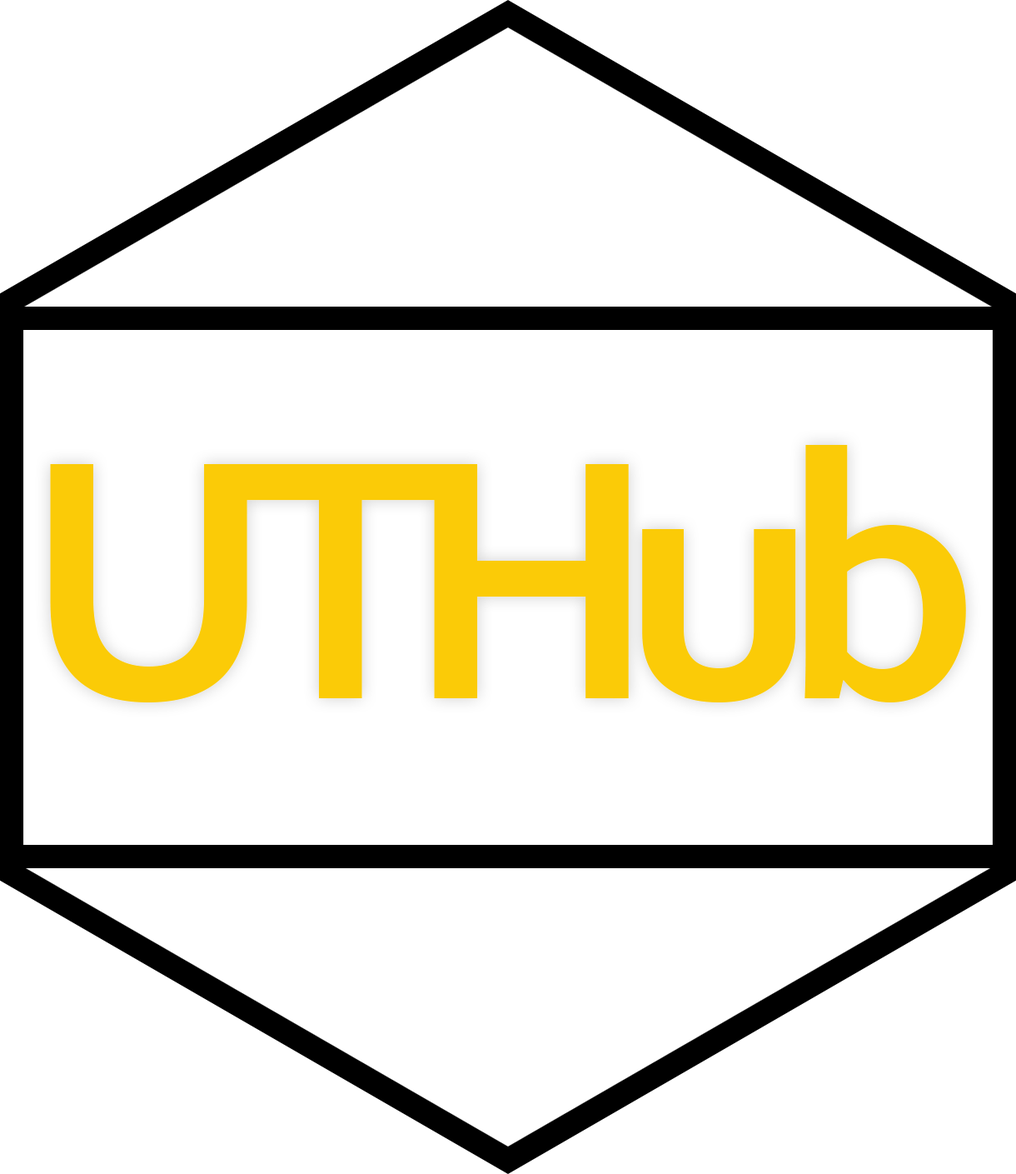
<style>
.page{position:relative;width:1016px;height:1174px;background:#ffffff}
.page>*{position:absolute;margin:0}
.t1{font:358.1px "Corbel-Bold";letter-spacing:-0.1em;color:#fbcb07}
</style>
<div class="page">
<p class="t1" style="left:50px;top:445px;width:916px;height:257px">UTHub</p>
</div>
